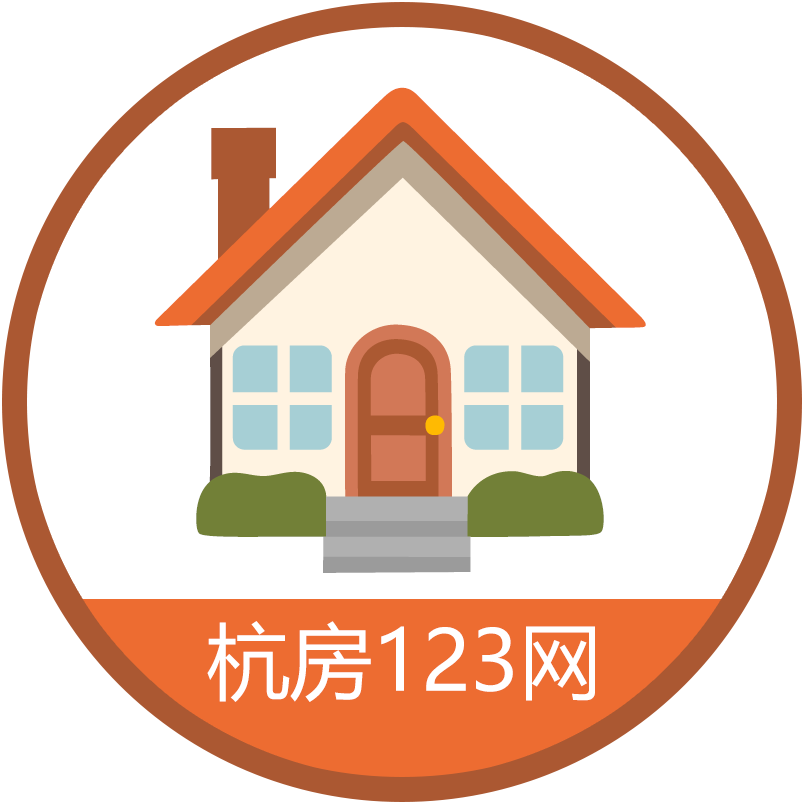
<style>
.page{position:relative;width:804px;height:804px;background:#ffffff}
.page>*{position:absolute;margin:0}
.t1{font:83.1px "MicrosoftYaHei";color:#ffffff}
</style>
<div class="page">
<p class="t1" style="left:207px;top:621px;width:388px;height:81px">杭房123网</p>
</div>
